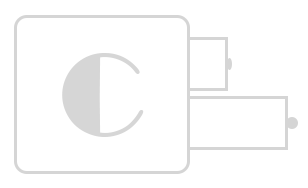
<style>
.page{position:relative;width:308px;height:188px;background:#ffffff}
.page>*{position:absolute;margin:0}
.t1{font:120px "Broadway";color:#d6d6d6}
</style>
<div class="page">
<p class="t1" style="left:62px;top:53px;width:82px;height:84px">C</p>
</div>
